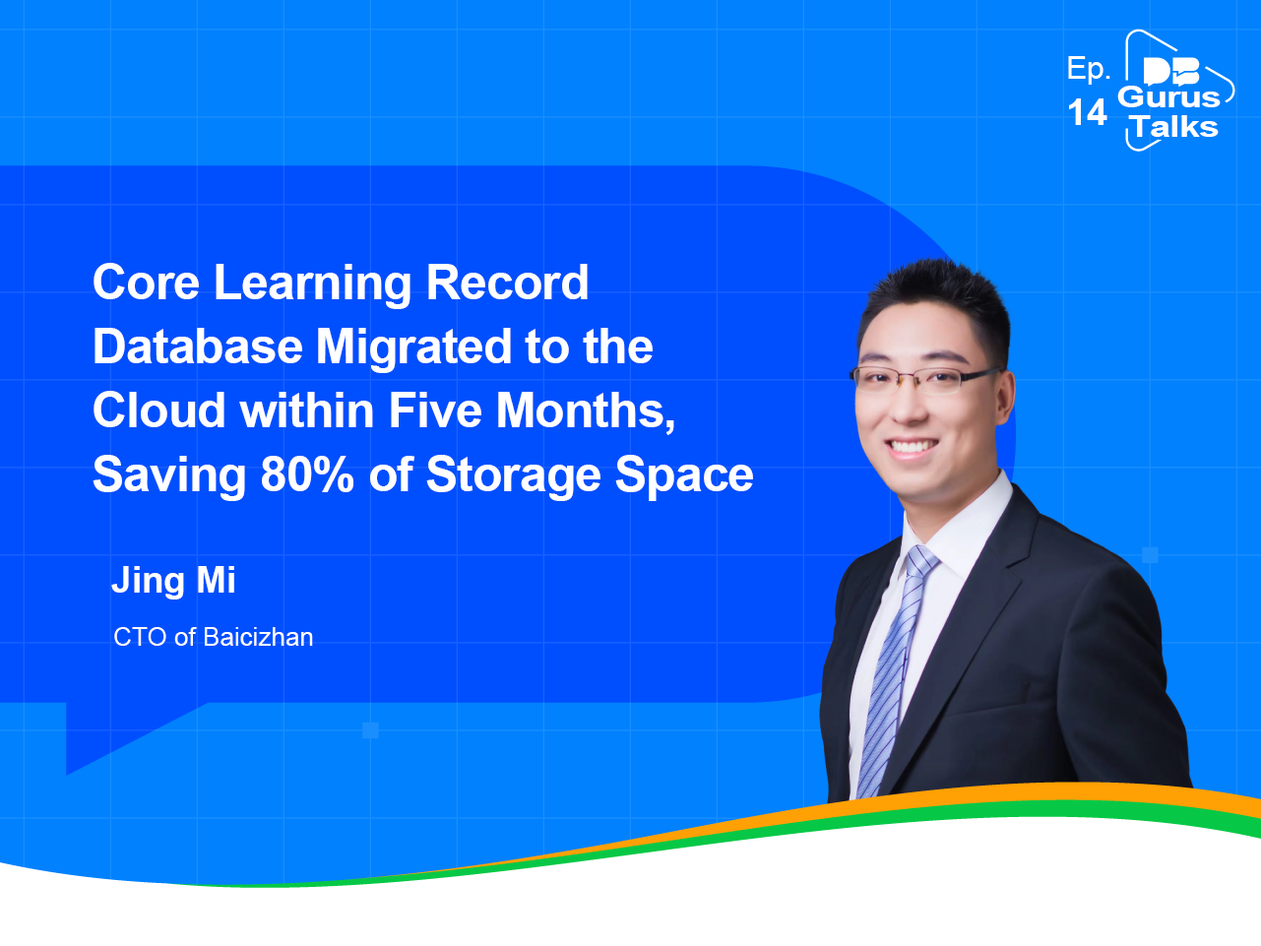
<style>
.page{position:relative;width:1261px;height:946px;background:#0181fd}
.page>*{position:absolute;margin:0}
.t1{font:31.5px/44.3px "ArialMT";letter-spacing:-0.02em;color:#ffffff}
.t2{font:37.4px/44.3px "Arial-BoldMT";letter-spacing:-0.02em;color:#ffffff}
.t3{font:29.5px/29.5px "Arial-BoldMT";letter-spacing:-0.03em;color:#ffffff;scale:1.26 1}
.t4{font:49.2px/64px "Arial-BoldMT";letter-spacing:-0.02em;color:#ffffff}
.t5{font:36.4px "Arial-BoldMT";color:#ffffff}
.t6{font:25.6px "ArialMT";color:#ffffff}
</style>
<div class="page">
<p class="t1" style="left:1068px;top:56px;width:42px;height:69px">Ep. <span class="t2">14</span></p>
<p class="t3" style="left:1117px;top:86px;width:103px;height:51px;text-align:center">Gurus <br>Talks</p>
<p class="t4" style="left:93px;top:263px;width:660px;height:238px">Core Learning Record Database Migrated to the Cloud within Five Months, Saving 80% of Storage Space</p>
<p class="t5" style="left:111px;top:566px;width:123px;height:33px">Jing Mi</p>
<p class="t6" style="left:114px;top:627px;width:199px;height:19px">CTO of Baicizhan</p>
</div>
